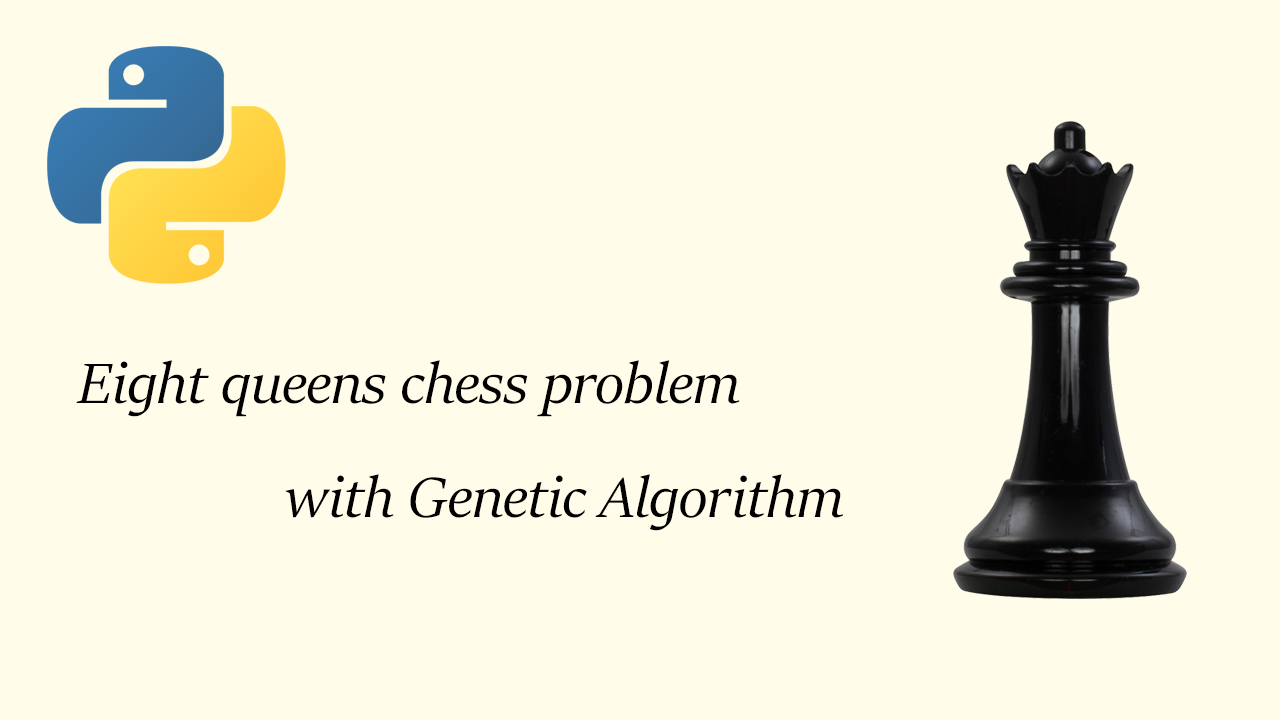
<style>
.page{position:relative;width:1280px;height:720px;background:#fffce9}
.page>*{position:absolute;margin:0}
.t1{font:63.5px "SitkaBanner-Italic";color:#000000}
</style>
<div class="page">
<p class="t1" style="left:76px;top:360px;width:664px;height:57px">Eight queens chess problem</p>
<p class="t1" style="left:285px;top:474px;width:558px;height:57px">with Genetic Algorithm</p>
</div>
